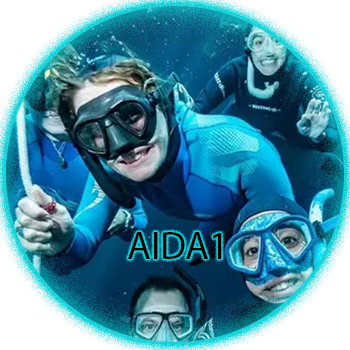
<style>
.page{position:relative;width:350px;height:350px}
.page>*{position:absolute;margin:0}
.t1{font:38.9px "MyriadPro-Regular";color:#100101}
</style>
<div class="page">
<p class="t1" style="left:128px;top:232px;width:94px;height:27px">AIDA1</p>
</div>
